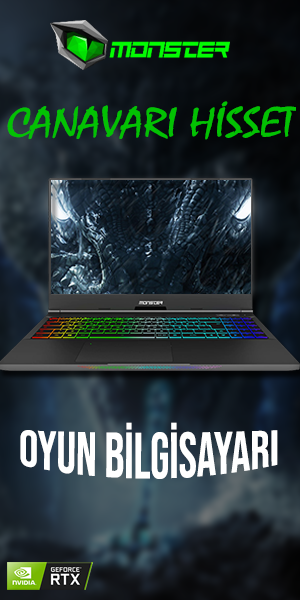
<style>
.page{position:relative;width:300px;height:600px}
.page>*{position:absolute;margin:0}
.t1{font:42.6px "Mistral";color:#03c103;scale:1.17 1}
.t2{font:48.6px "BebasNeue-Regular";color:#ffffff}
</style>
<div class="page">
<p class="t1" style="left:7px;top:101px;width:289px;height:39px">CANAVARI HİSSET</p>
<p class="t2" style="left:20px;top:422px;width:258px;height:57px">OYUN BİLGİSAYARI</p>
</div>
